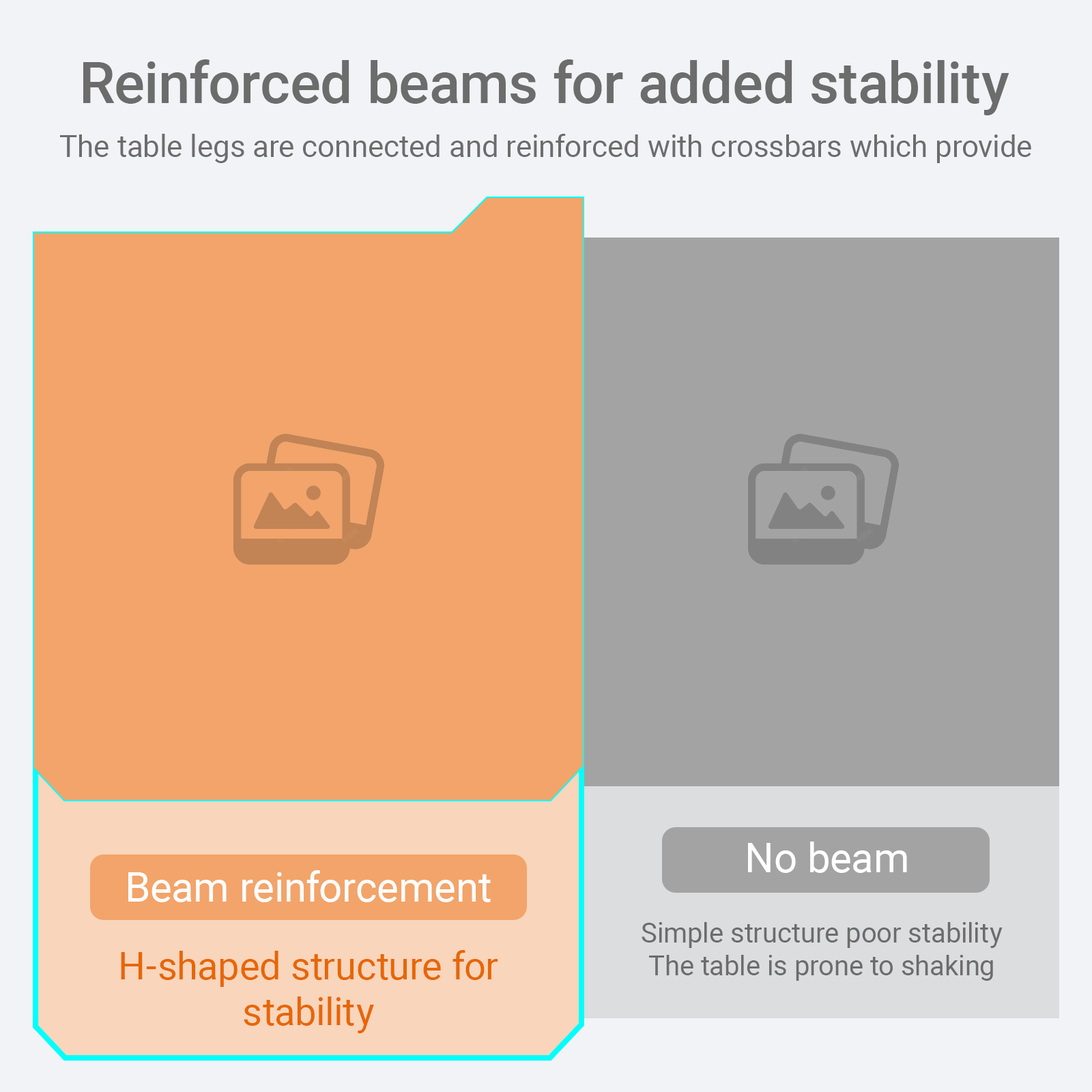
<style>
.page{position:relative;width:1092px;height:1092px;background:#f2a46a}
.page>*{position:absolute;margin:0}
.t1{font:57.3px "Roboto-Medium";color:#6c6c6c}
.t2{font:30px "Roboto-Regular";color:#6c6c6c}
.t3{font:40.9px "Roboto-Regular";color:#ffffff}
.t4{font:40.9px "Roboto-Regular";color:#fefefe}
.t5{font:27.3px "Roboto-Regular";color:#6c6c6c}
.t6{font:38.2px "Roboto-Regular";color:#e76605}
</style>
<div class="page">
<p class="t1" style="left:83px;top:59px;width:926px;height:56px">Reinforced beams for added stability</p>
<p class="t2" style="left:60px;top:134px;width:971px;height:29px">The table legs are connected and reinforced with crossbars which provide</p>
<p class="t3" style="left:748px;top:842px;width:159px;height:31px">No beam</p>
<p class="t4" style="left:128px;top:870px;width:363px;height:32px">Beam reinforcement</p>
<p class="t5" style="left:642px;top:922px;width:361px;height:59px;text-align:center">Simple structure poor stability The table is prone to shaking</p>
<p class="t6" style="left:121px;top:950px;width:377px;height:83px;text-align:center">H-shaped structure for stability</p>
</div>
